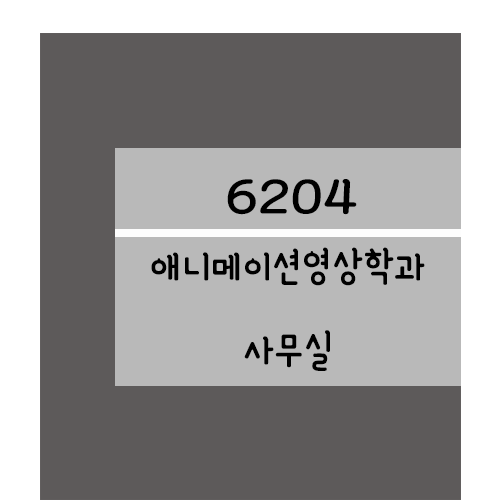
<style>
.page{position:relative;width:500px;height:500px;background:#5d5a5a}
.page>*{position:absolute;margin:0}
.t1{font:61.2px "YanoljaYacheR";color:#000000;scale:1.18 1}
.t2{font:48px "YanoljaYacheR";color:#000000}
</style>
<div class="page">
<p class="t1" style="left:227px;top:179px;width:130px;height:36px">6204</p>
<p class="t2" style="left:151px;top:247px;width:274px;height:124px;text-align:center">애니메이션영상학과 <br>사무실</p>
</div>
